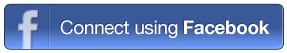
<style>
.page{position:relative;width:287px;height:53px;background:#3b5998}
.page>*{position:absolute;margin:0}
.t1{font:18.7px "HelveticaNeueLT-Roman";letter-spacing:-0.015em;color:#ffffff}
.t2{font:18.7px "HelveticaNeueLT-Bold";letter-spacing:-0.015em;color:#ffffff}
</style>
<div class="page">
<p class="t1" style="left:60px;top:20px;width:210px;height:18px">Connect using <span class="t2">Facebook</span></p>
</div>
